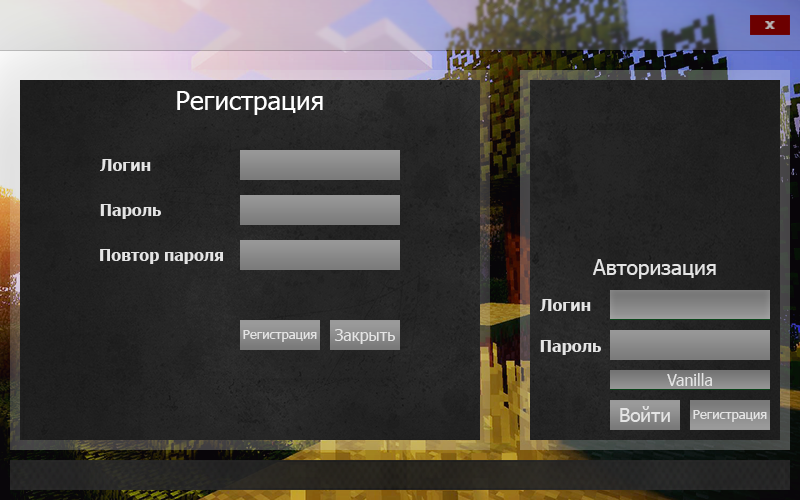
<style>
.page{position:relative;width:800px;height:500px}
.page>*{position:absolute;margin:0}
.t1{font:26px "Tahoma";color:#ffffff}
.t2{font:16px "Tahoma-Bold";color:#e4e4e4}
.t3{font:21px "Tahoma";color:#e4e4e4}
.t4{font:16px "Tahoma";color:#e4e4e4}
.t5{font:13px "Tahoma";color:#e4e4e4}
.t6{font:19px "Tahoma";color:#e4e4e4}
</style>
<div class="page">
<p class="t1" style="left:177px;top:91px;width:146px;height:24px">Регистрация</p>
<p class="t2" style="left:100px;top:159px;width:51px;height:12px">Логин</p>
<p class="t2" style="left:100px;top:204px;width:61px;height:15px">Пароль</p>
<p class="t2" style="left:100px;top:249px;width:123px;height:15px">Повтор пароля</p>
<p class="t3" style="left:593px;top:259px;width:123px;height:20px">Авторизация</p>
<p class="t2" style="left:540px;top:299px;width:51px;height:12px">Логин</p>
<p class="t4" style="left:334px;top:329px;width:61px;height:15px">Закрыть</p>
<p class="t5" style="left:243px;top:330px;width:74px;height:12px">Регистрация</p>
<p class="t2" style="left:540px;top:340px;width:61px;height:15px">Пароль</p>
<p class="t4" style="left:667px;top:373px;width:45px;height:13px">Vanilla</p>
<p class="t6" style="left:620px;top:406px;width:50px;height:16px">Войти</p>
<p class="t5" style="left:693px;top:410px;width:74px;height:12px">Регистрация</p>
</div>
